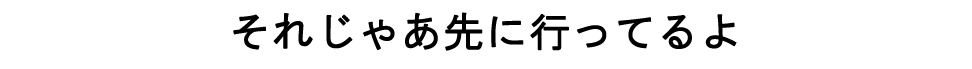
<style>
.page{position:relative;width:972px;height:69px;background:#ffffff}
.page>*{position:absolute;margin:0}
.t1{font:41.7px "HGGothicM";color:#000000;font-weight:bold}
</style>
<div class="page">
<p class="t1" style="left:233px;top:12px;width:504px;height:39px">それじゃあ先に行ってるよ</p>
</div>
